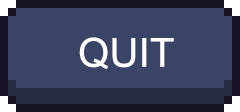
<style>
.page{position:relative;width:240px;height:112px;background:#3a4466}
.page>*{position:absolute;margin:0}
.t1{font:40px "ArialMT";letter-spacing:0.005em;color:#ffffff}
</style>
<div class="page">
<p class="t1" style="left:79px;top:37px;width:95px;height:32px">QUIT</p>
</div>
